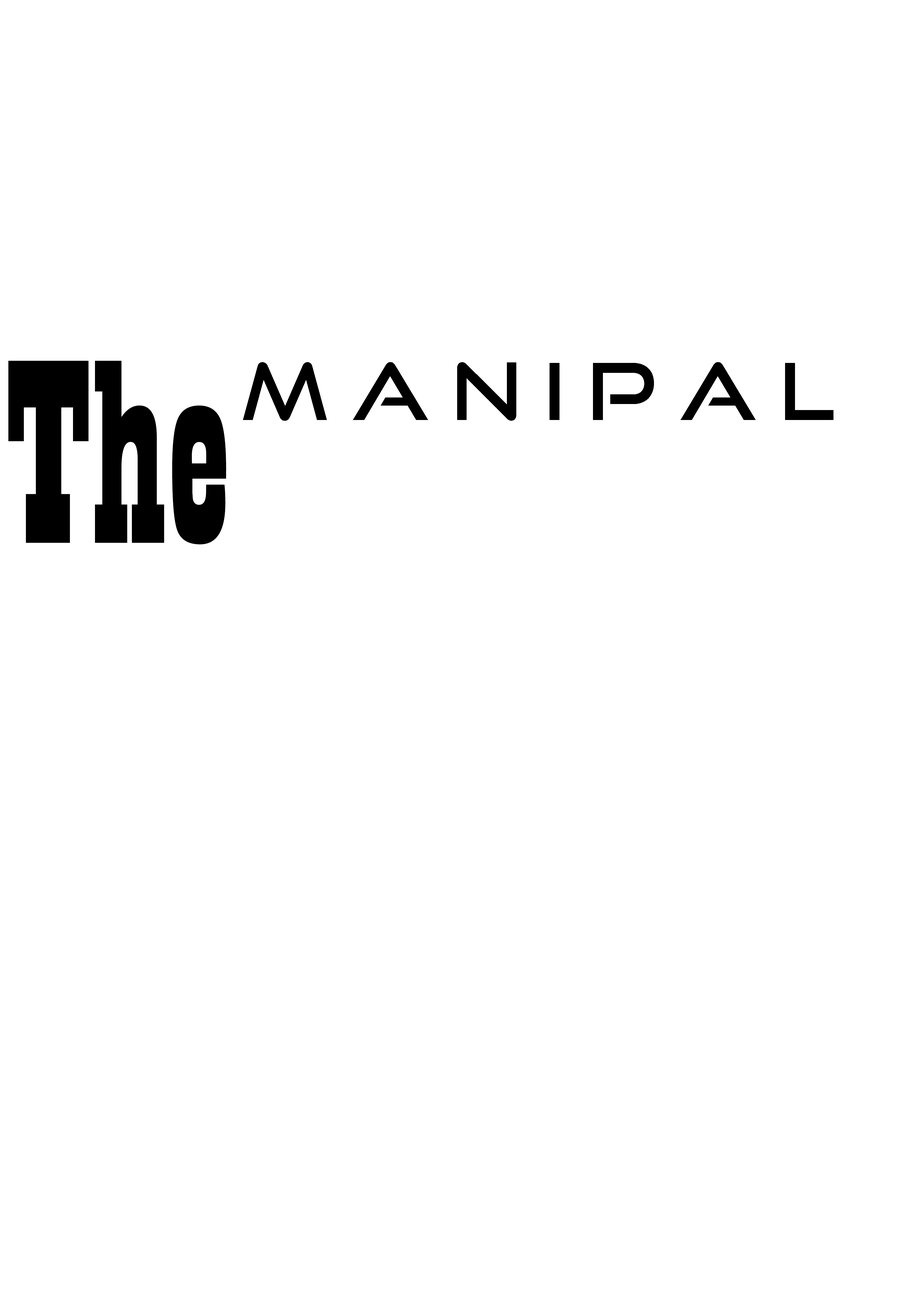
<style>
.page{position:relative;width:918px;height:1299px;background:#ffffff}
.page>*{position:absolute;margin:0}
.t1{font:272.7px "Playbill";color:#000000}
.t2{font:78.5px "GoodTimesRg-Regular";color:#000000}
</style>
<div class="page">
<p class="t1" style="left:8px;top:360px;width:218px;height:184px">The</p>
<p class="t2" style="left:243px;top:362px;width:591px;height:59px">M A N I P A L</p>
</div>
